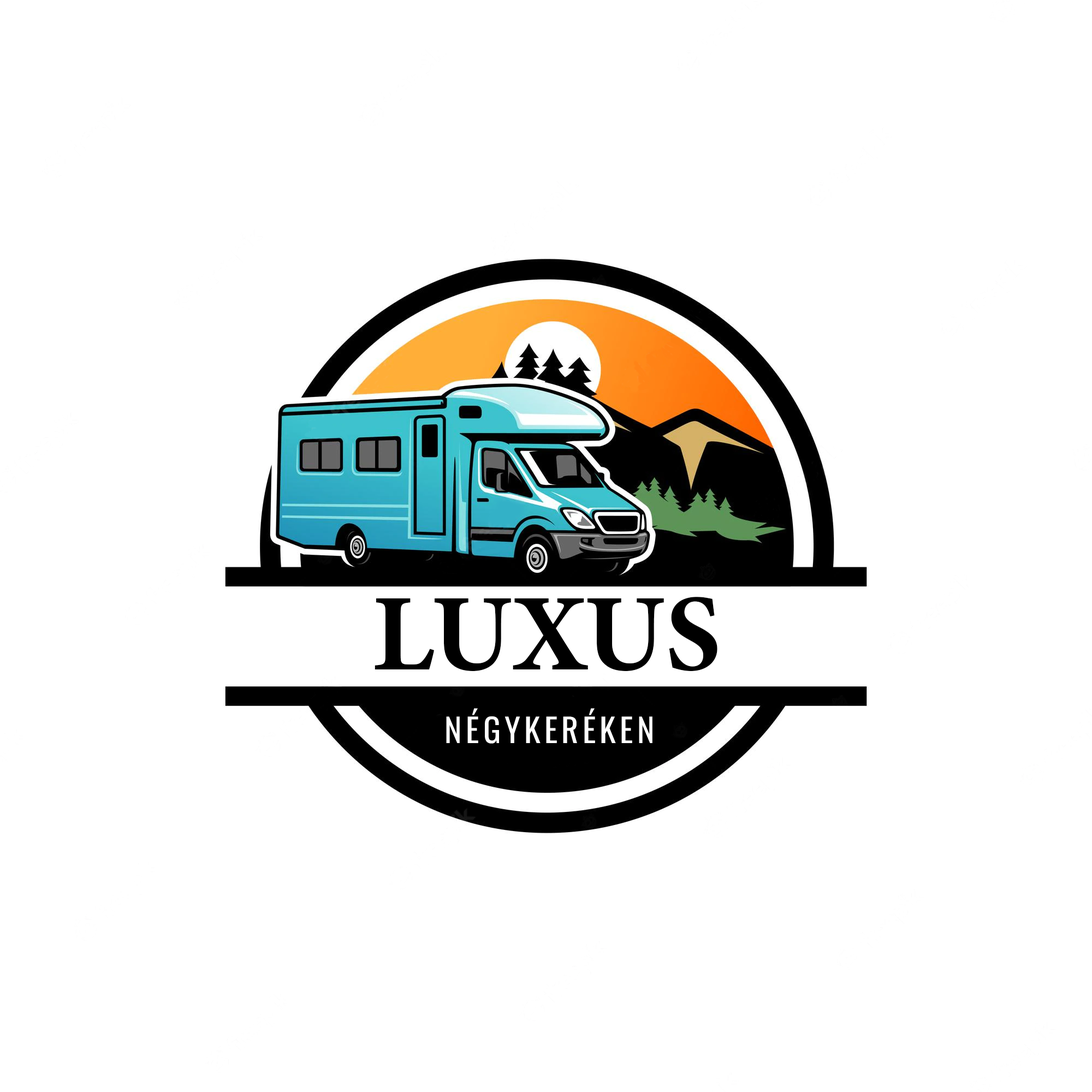
<style>
.page{position:relative;width:1092px;height:1092px;background:#ffffff}
.page>*{position:absolute;margin:0}
.t1{font:109.2px "MinionConceptRoman-Bold";color:#000000}
.t2{font:32.8px "Oswald-Regular";letter-spacing:0.12em;color:#fefefe}
</style>
<div class="page">
<p class="t1" style="left:375px;top:597px;width:342px;height:74px">LUXUS</p>
<p class="t2" style="left:446px;top:708px;width:206px;height:36px">NÉGYKERÉKEN</p>
</div>
